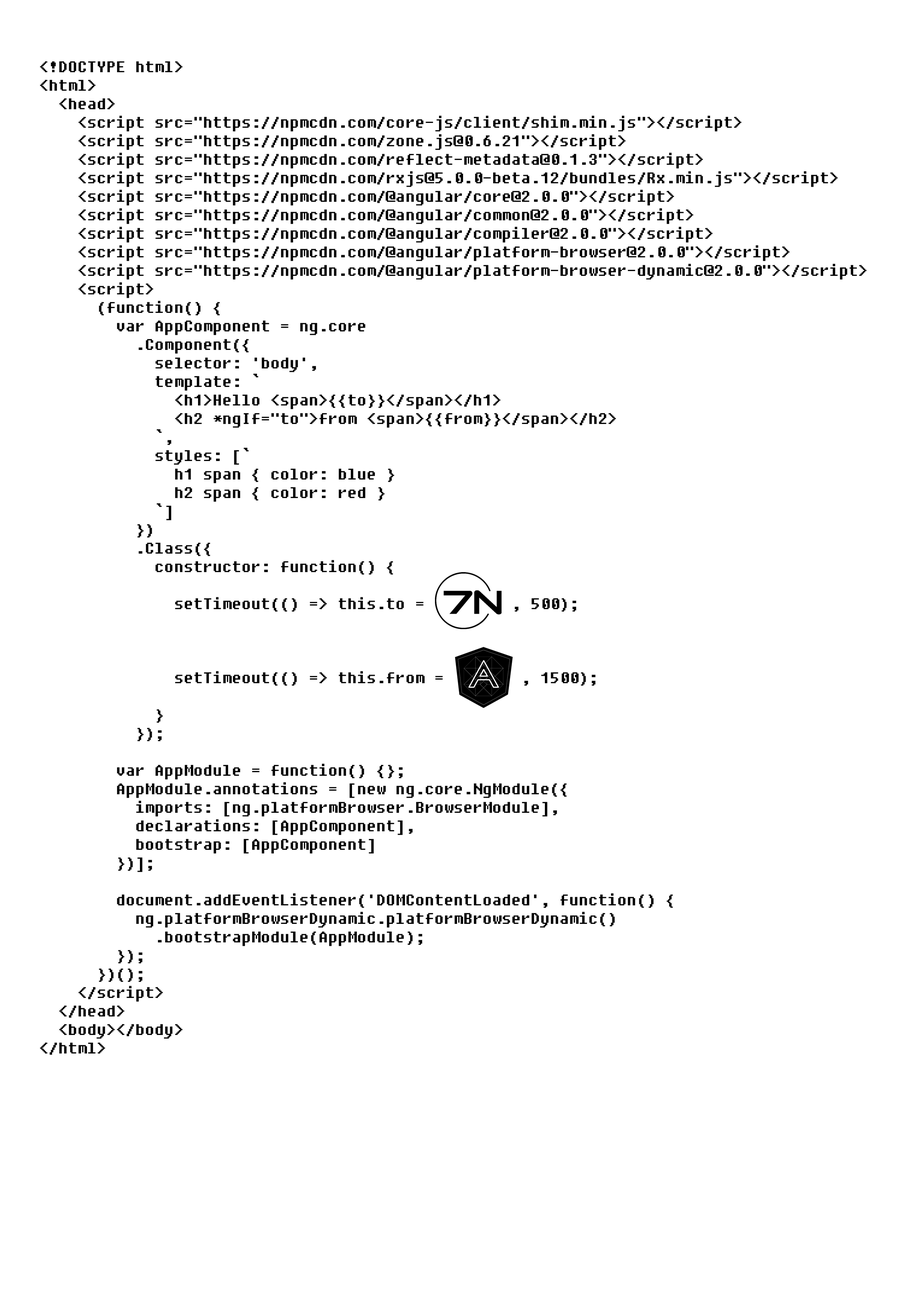
<style>
.page{position:relative;width:918px;height:1299px;background:#ffffff}
.page>*{position:absolute;margin:0}
.t1{font:15.4px "Fixedsys";color:#000000}
</style>
<div class="page">
<p class="t1" style="left:40px;top:61px;width:827px;height:994px">&lt;!DOCTYPE html&gt;<br>&lt;html&gt;<br>  &lt;head&gt;<br>    &lt;script src="https://npmcdn.com/core-js/client/shim.min.js"&gt;&lt;/script&gt;<br>    &lt;script src="https://npmcdn.com/zone.js@0.6.21"&gt;&lt;/script&gt;<br>    &lt;script src="https://npmcdn.com/reflect-metadata@0.1.3"&gt;&lt;/script&gt;<br>    &lt;script src="https://npmcdn.com/rxjs@5.0.0-beta.12/bundles/Rx.min.js"&gt;&lt;/script&gt;<br>    &lt;script src="https://npmcdn.com/@angular/core@2.0.0"&gt;&lt;/script&gt;<br>    &lt;script src="https://npmcdn.com/@angular/common@2.0.0"&gt;&lt;/script&gt;<br>    &lt;script src="https://npmcdn.com/@angular/compiler@2.0.0"&gt;&lt;/script&gt;<br>    &lt;script src="https://npmcdn.com/@angular/platform-browser@2.0.0"&gt;&lt;/script&gt;<br>    &lt;script src="https://npmcdn.com/@angular/platform-browser-dynamic@2.0.0"&gt;&lt;/script&gt;<br>    &lt;script&gt;<br>      (function() {<br>        var AppComponent = ng.core<br>          .Component({<br>            selector: 'body',<br>            template: `<br>              &lt;h1&gt;Hello &lt;span&gt;{{to}}&lt;/span&gt;&lt;/h1&gt;<br>              &lt;h2 *ngIf="to"&gt;from &lt;span&gt;{{from}}&lt;/span&gt;&lt;/h2&gt;<br>            `,<br>            styles: [`<br>              h1 span { color: blue }<br>              h2 span { color: red }<br>            `]<br>          })<br>          .Class({<br>            constructor: function() {<br><br>              setTimeout(() =&gt; this.to =         , 500);<br><br><br><br>              setTimeout(() =&gt; this.from =        , 1500);<br><br>            }<br>          });<br><br>        var AppModule = function() {};<br>        AppModule.annotations = [new ng.core.NgModule({<br>          imports: [ng.platformBrowser.BrowserModule],<br>          declarations: [AppComponent],<br>          bootstrap: [AppComponent]<br>        })];<br><br>        document.addEventListener('DOMContentLoaded', function() {<br>          ng.platformBrowserDynamic.platformBrowserDynamic()<br>            .bootstrapModule(AppModule);<br>        });<br>      })();<br>    &lt;/script&gt;<br>  &lt;/head&gt;<br>  &lt;body&gt;&lt;/body&gt;<br>&lt;/html&gt;</p>
</div>
